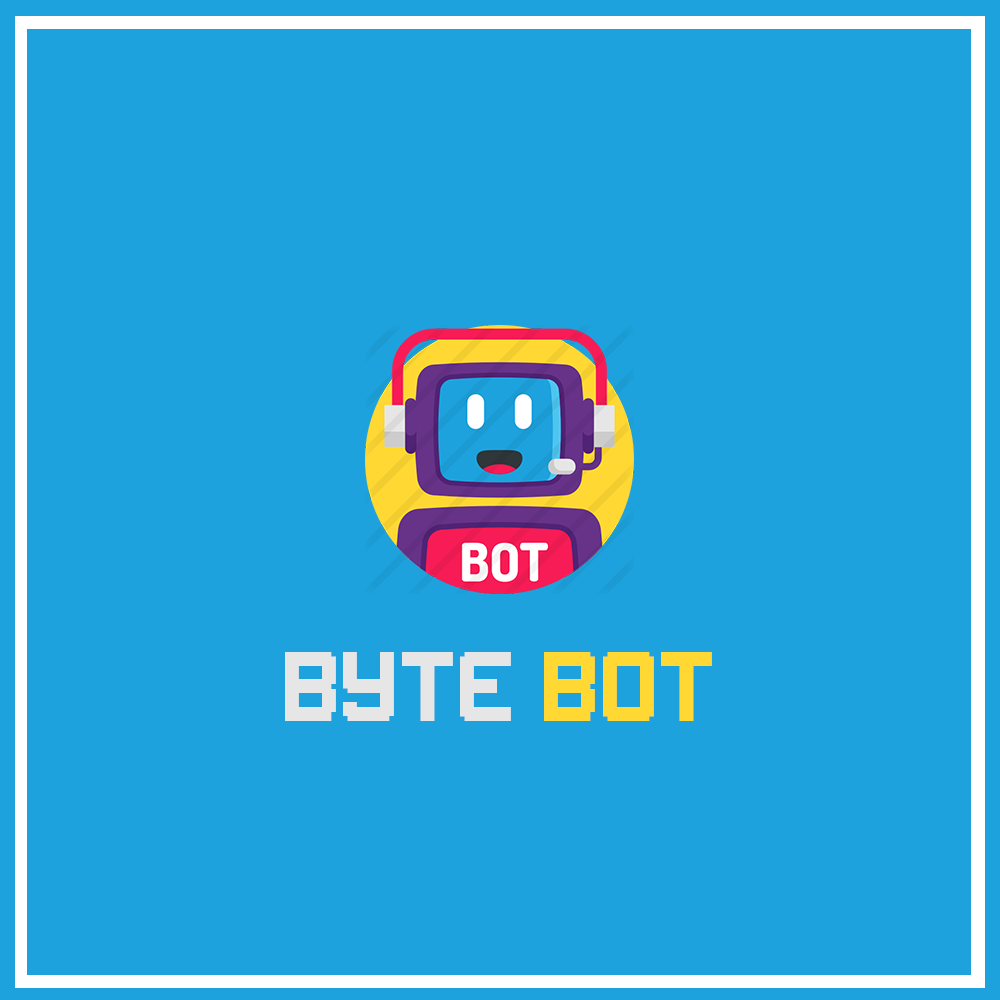
<style>
.page{position:relative;width:1000px;height:1000px;background:#1da2dd}
.page>*{position:absolute;margin:0}
.t1{font:7px "Gameplay";letter-spacing:0.04em;color:#e6e6e6}
.t2{font:7px "Gameplay";letter-spacing:0.04em;color:#ffd833}
</style>
<div class="page">
<p class="t1" style="left:285px;top:652px;width:427px;height:69px">BYTE <span class="t2">BOT</span></p>
</div>
